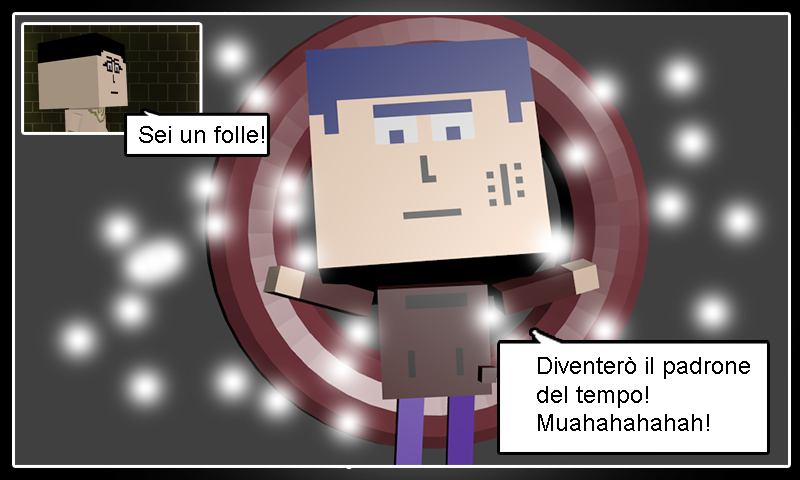
<style>
.page{position:relative;width:800px;height:480px}
.page>*{position:absolute;margin:0}
.t1{font:24px "ArialMT";color:#000000}
</style>
<div class="page">
<p class="t1" style="left:139px;top:126px;width:125px;height:17px">Sei un folle!</p>
<p class="t1" style="left:537px;top:357px;width:213px;height:74px">Diventerò il padrone<br>del tempo!<br>Muahahahahah!</p>
</div>
